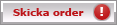
<style>
.page{position:relative;width:117px;height:25px}
.page>*{position:absolute;margin:0}
.t1{font:10px "Verdana-Bold";color:#bd1418}
.t2{font:12px "Verdana-Bold";color:#ffffff}
</style>
<div class="page">
<p class="t1" style="left:13px;top:8px;width:71px;height:8px">Skicka order</p>
<p class="t2" style="left:100px;top:7px;width:3px;height:9px">!</p>
</div>
